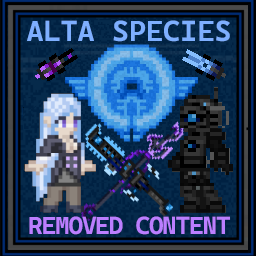
<style>
.page{position:relative;width:256px;height:256px}
.page>*{position:absolute;margin:0}
.t1{font:29.2px "CascadiaMonoRoman-Bold";color:#7eafff}
.t2{font:25px "CascadiaCodeRoman-Bold";letter-spacing:-0.05em;color:#bb7eff}
</style>
<div class="page">
<p class="t1" style="left:27px;top:20px;width:203px;height:22px">ALTA SPECIES</p>
<p class="t2" style="left:29px;top:216px;width:201px;height:19px">REMOVED CONTENT</p>
</div>
